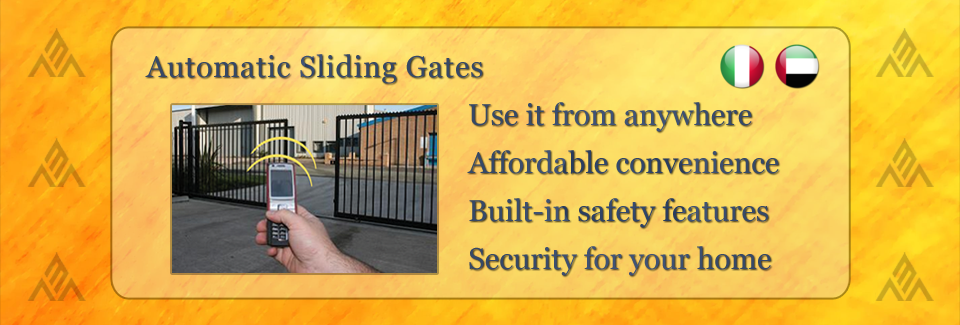
<style>
.page{position:relative;width:960px;height:325px}
.page>*{position:absolute;margin:0}
.t1{font:30px "Georgia";letter-spacing:0.025em;color:#364866}
.t2{font:30px/48px "Georgia";color:#384a6a}
</style>
<div class="page">
<p class="t1" style="left:145px;top:54px;width:338px;height:30px">Automatic Sliding Gates</p>
<p class="t2" style="left:467px;top:102px;width:312px;height:174px">Use it from anywhere<br>Affordable convenience<br>Built-in safety features<br>Security for your home</p>
</div>
